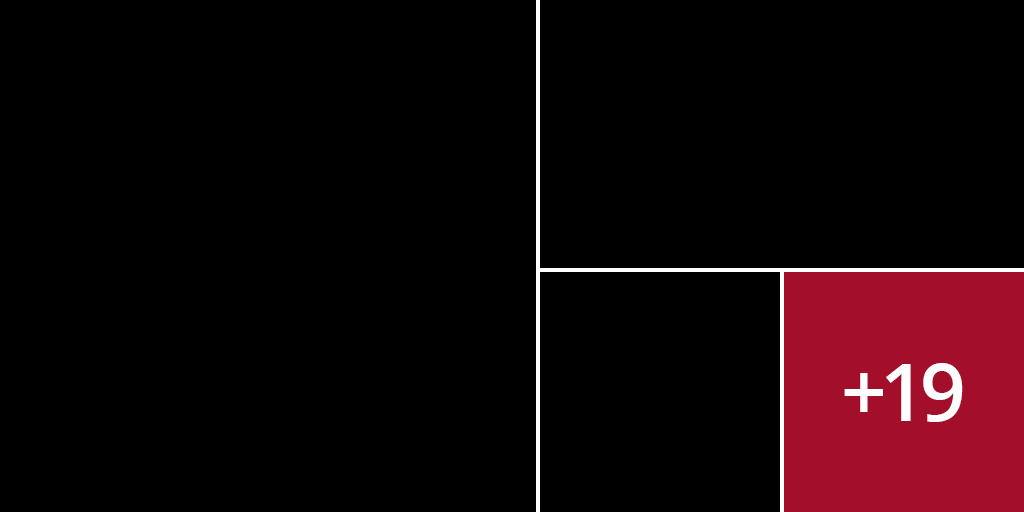
<style>
.page{position:relative;width:1024px;height:512px;background:#000000}
.page>*{position:absolute;margin:0}
.t1{font:80px "OpenSans-Semibold";color:#ffffff;text-transform:uppercase}
</style>
<div class="page">
<p class="t1" style="left:844px;top:363px;width:119px;height:59px">+19</p>
</div>
